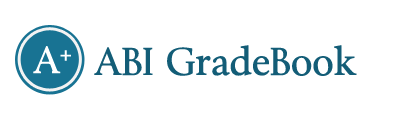
<style>
.page{position:relative;width:400px;height:120px;background:#ffffff}
.page>*{position:absolute;margin:0}
.t1{font:35.1px "Byington";color:#ffffff}
.t2{font:36px "Byington";color:#135d77}
</style>
<div class="page">
<p class="t1" style="left:33px;top:46px;width:38px;height:28px">A+</p>
<p class="t2" style="left:94px;top:45px;width:263px;height:31px">ABI GradeBook</p>
</div>
